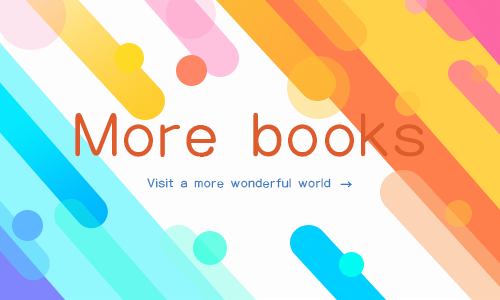
<style>
.page{position:relative;width:500px;height:300px;background:#fdfdfd}
.page>*{position:absolute;margin:0}
.t1{font:60px "HYe3gj";color:#de5c2c}
.t2{font:12px "HYe3gj";letter-spacing:0.02em;color:#3679c5}
.t3{font:12px "SourceHanSansCN-Medium";letter-spacing:0.02em;color:#3679c5}
</style>
<div class="page">
<p class="t1" style="left:75px;top:112px;width:349px;height:45px">More books</p>
<p class="t2" style="left:147px;top:178px;width:184px;height:10px">Visit a more wonderful world</p>
<p class="t3" style="left:340px;top:181px;width:12px;height:7px">→</p>
</div>
